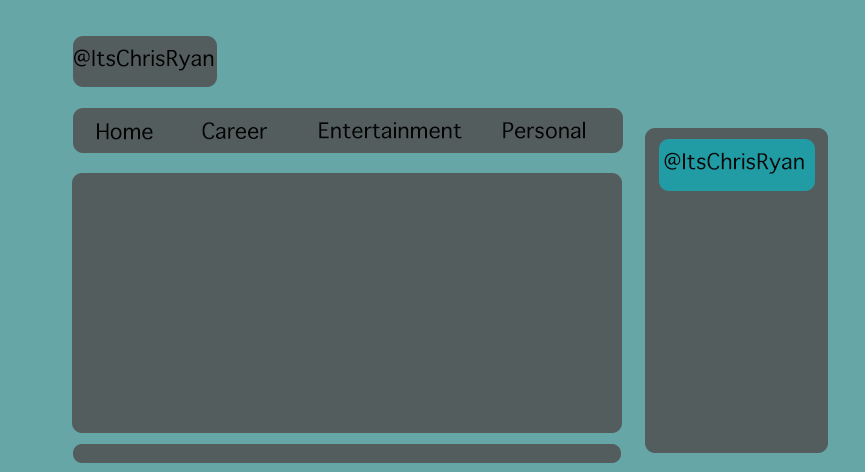
<style>
.page{position:relative;width:865px;height:472px;background:#535d5d}
.page>*{position:absolute;margin:0}
.t1{font:21px "Thonburi";color:#030303}
.t2{font:21px "Thonburi";color:#090909}
</style>
<div class="page">
<p class="t1" style="left:74px;top:49px;width:140px;height:22px">@ItsChrisRyan</p>
<p class="t1" style="left:97px;top:123px;width:56px;height:17px">Home</p>
<p class="t1" style="left:202px;top:122px;width:65px;height:18px">Career</p>
<p class="t1" style="left:319px;top:122px;width:143px;height:17px">Entertainment</p>
<p class="t1" style="left:503px;top:121px;width:82px;height:18px">Personal</p>
<p class="t2" style="left:664px;top:152px;width:140px;height:22px">@ItsChrisRyan</p>
</div>
